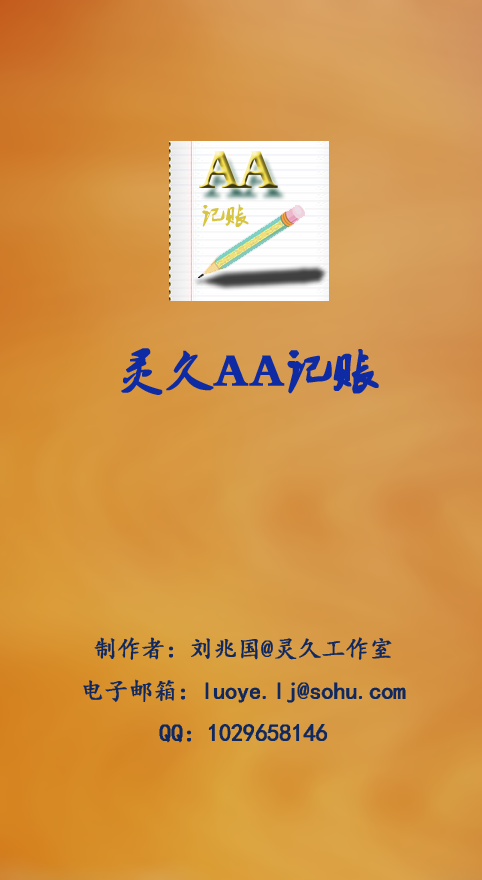
<style>
.page{position:relative;width:482px;height:880px}
.page>*{position:absolute;margin:0}
.t1{font:46.5px "2.0-";color:#0f2ba3;font-weight:bold}
.t2{font:24px "¿¬Ìå";color:#102860;font-weight:bold}
</style>
<div class="page">
<p class="t1" style="left:121px;top:348px;width:258px;height:47px">灵久AA记账</p>
<p class="t2" style="left:83px;top:637px;width:323px;height:106px;text-align:center">制作者：刘兆国@灵久工作室<br>电子邮箱：luoye.lj@sohu.com<br>QQ：1029658146</p>
</div>
